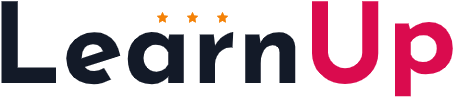
<style>
.page{position:relative;width:457px;height:100px;background:#ffffff}
.page>*{position:absolute;margin:0}
.t1{font:111px "JosefinSans-Bold";color:#131a28}
.t2{font:111px "JosefinSans-Bold";color:#da0b4e}
</style>
<div class="page">
<p class="t1" style="left:1px;top:1px;width:452px;height:96px">Learn<span class="t2">U</span><span class="t2">p</span></p>
</div>
